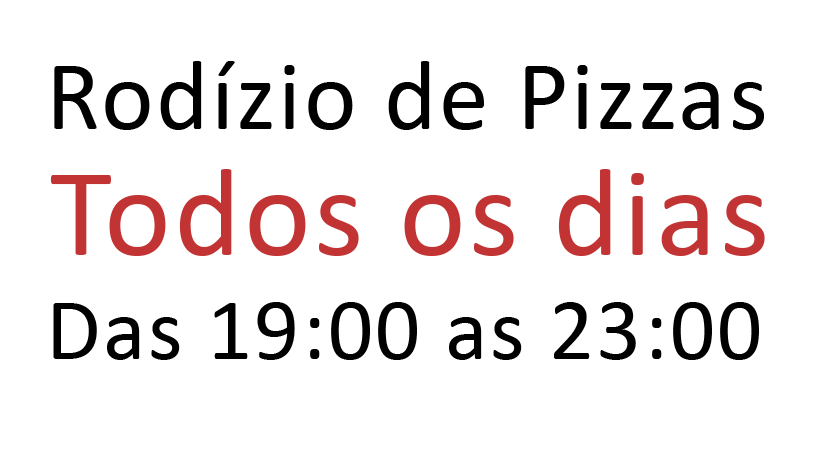
<style>
.page{position:relative;width:834px;height:459px;background:#ffffff}
.page>*{position:absolute;margin:0}
.t1{font:100px "Calibri";letter-spacing:0.025em;color:#000000}
.t2{font:127px "Calibri";letter-spacing:0.025em;color:#c23434}
.t3{font:89px "Calibri";letter-spacing:0.025em;color:#000000}
</style>
<div class="page">
<p class="t1" style="left:54px;top:61px;width:710px;height:69px">Rodízio de Pizzas</p>
<p class="t2" style="left:50px;top:169px;width:715px;height:87px">Todos os dias</p>
<p class="t3" style="left:53px;top:302px;width:706px;height:58px">Das 19:00 as 23:00</p>
</div>
